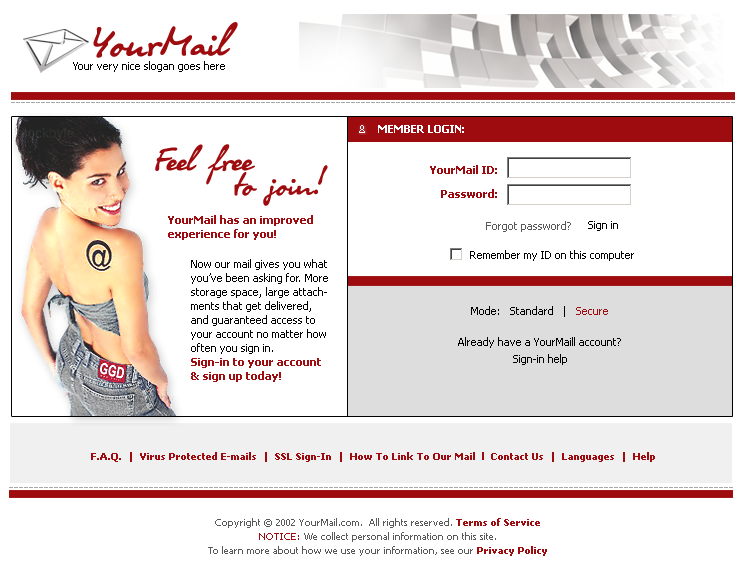
<style>
.page{position:relative;width:752px;height:578px;background:#ffffff}
.page>*{position:absolute;margin:0}
.t1{font:46px "OlgaCTT";color:#9e0c0f}
.t2{font:11px "Tahoma";color:#000000}
.t3{font:11px "Tahoma-Bold";color:#ffffff;text-transform:uppercase}
.t4{font:36px/24px "OlgaCTT";color:#9e0c0f}
.t5{font:11px/24px "Tahoma-Bold";color:#9e0b0e}
.t6{font:11px/14px "Tahoma-Bold";color:#9f0d10}
.t7{font:11px "Tahoma";color:#595959}
.t8{font:11px/14px "Tahoma";color:#000000}
.t9{font:11px "Tahoma";color:#9e0c0f}
.t10{font:10px "Tahoma-Bold";color:#9e0c0f}
.t11{font:10px/14px "Tahoma";color:#595959}
.t12{font:10px/14px "Tahoma-Bold";color:#9e0c0f}
.t13{font:10px/14px "Tahoma";color:#9e0c0f}
</style>
<div class="page">
<p class="t1" style="left:93px;top:22px;width:145px;height:36px">YourMail</p>
<p class="t2" style="left:73px;top:61px;width:152px;height:11px">Your very nice slogan goes here</p>
<p class="t3" style="left:378px;top:125px;width:86px;height:8px">Member LOgin:</p>
<p class="t4" style="left:155px;top:144px;width:173px;height:62px">Feel free<br>      to join!</p>
<p class="t5" style="left:430px;top:165px;width:67px;height:33px;text-align:right">YourMail ID:<br>Password:</p>
<p class="t6" style="left:168px;top:215px;width:145px;height:25px">YourMail has an improved<br>experience for you!</p>
<p class="t7" style="left:486px;top:221px;width:85px;height:11px">Forgot password?</p>
<p class="t2" style="left:588px;top:221px;width:30px;height:10px">Sign in</p>
<p class="t2" style="left:470px;top:250px;width:164px;height:11px">Remember my ID on this computer</p>
<p class="t8" style="left:191px;top:259px;width:137px;height:123px">Now our mail gives you what you’ve been asking for. More storage space, large attachments that get delivered, and guaranteed access to your account no matter how often you sign in.<br><span class="t6">Sign-in to your account &amp; sign up today!</span></p>
<p class="t2" style="left:471px;top:306px;width:137px;height:11px">Mode:   Standard   |   <span class="t9">Secure</span></p>
<p class="t2" style="left:458px;top:337px;width:163px;height:11px">Already have a YourMaill account?</p>
<p class="t2" style="left:513px;top:354px;width:54px;height:11px">Sign-in help</p>
<p class="t10" style="left:91px;top:452px;width:564px;height:10px">F.A.Q.  |  Virus Protected E-mails  |  SSL Sign-In  |  How To Link To Our Mail  l  Contact Us  |  Languages  |  Help</p>
<p class="t11" style="left:208px;top:518px;width:339px;height:38px;text-align:center">Copyright © 2002 YourMail.com.  All rights reserved. <span class="t12">Terms of Service<br></span><span class="t13">NOTICE:</span> We collect personal information on this site.<br>To learn more about how we use your information, see our <span class="t12">Privacy Policy</span></p>
</div>
